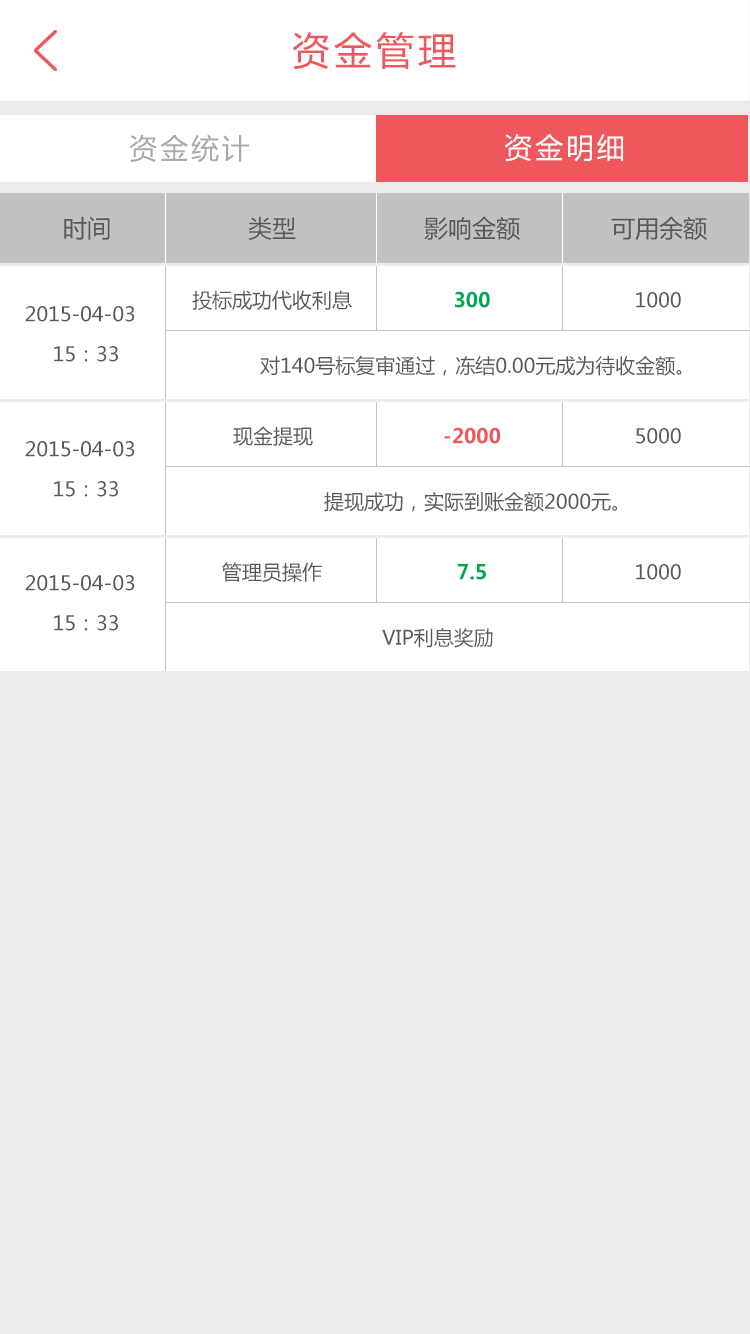
<style>
.page{position:relative;width:750px;height:1334px;background:#ebebeb}
.page>*{position:absolute;margin:0}
.t1{font:38px "MicrosoftYaHei";letter-spacing:0.1em;color:#ee575b}
.t2{font:28px "MicrosoftYaHei";letter-spacing:0.1em;color:#a7a9ac}
.t3{font:28px "MicrosoftYaHei";letter-spacing:0.1em;color:#ffffff}
.t4{font:24px "MicrosoftYaHei";color:#58595b}
.t5{font:20px "MicrosoftYaHei";color:#58595b}
.t6{font:20px "MicrosoftYaHei-Bold";color:#00a651}
.t7{font:20px/40px "MicrosoftYaHei";color:#58595b}
.t8{font:20px "MicrosoftYaHei-Bold";color:#ee575b}
</style>
<div class="page">
<p class="t1" style="left:292px;top:32px;width:164px;height:38px">资金管理</p>
<p class="t2" style="left:129px;top:134px;width:121px;height:28px">资金统计</p>
<p class="t3" style="left:504px;top:134px;width:119px;height:28px">资金明细</p>
<p class="t4" style="left:64px;top:216px;width:46px;height:24px">时间</p>
<p class="t4" style="left:248px;top:216px;width:48px;height:24px">类型</p>
<p class="t4" style="left:424px;top:216px;width:96px;height:25px">影响金额</p>
<p class="t4" style="left:611px;top:216px;width:96px;height:25px">可用余额</p>
<p class="t5" style="left:192px;top:290px;width:160px;height:20px">投标成功代收利息</p>
<p class="t6" style="left:455px;top:291px;width:35px;height:17px">300</p>
<p class="t5" style="left:636px;top:292px;width:45px;height:16px">1000</p>
<p class="t7" style="left:25px;top:306px;width:110px;height:56px;text-align:center">2015-04-03  <br>15：33</p>
<p class="t5" style="left:260px;top:355px;width:422px;height:21px">对140号标复审通过，冻结0.00元成为待收金额。</p>
<p class="t5" style="left:233px;top:426px;width:80px;height:20px">现金提现</p>
<p class="t8" style="left:444px;top:427px;width:57px;height:17px">-2000</p>
<p class="t5" style="left:636px;top:428px;width:45px;height:16px">5000</p>
<p class="t7" style="left:25px;top:441px;width:110px;height:56px;text-align:center">2015-04-03  <br>15：33</p>
<p class="t5" style="left:324px;top:492px;width:293px;height:20px">提现成功，实际到账金额2000元。</p>
<p class="t5" style="left:222px;top:562px;width:100px;height:20px">管理员操作</p>
<p class="t6" style="left:457px;top:564px;width:29px;height:16px">7.5</p>
<p class="t5" style="left:636px;top:564px;width:45px;height:16px">1000</p>
<p class="t7" style="left:25px;top:575px;width:110px;height:56px;text-align:center">2015-04-03  <br>15：33</p>
<p class="t5" style="left:382px;top:628px;width:111px;height:20px">VIP利息奖励</p>
</div>
